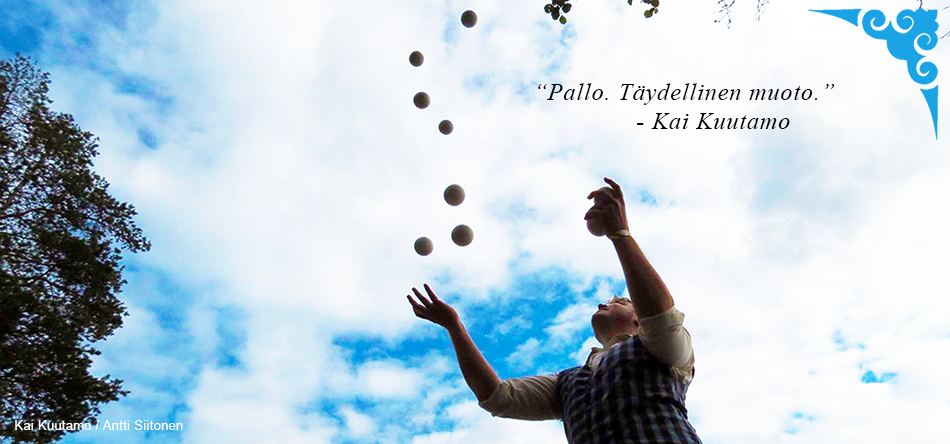
<style>
.page{position:relative;width:950px;height:444px}
.page>*{position:absolute;margin:0}
.t1{font:24px "TimesNewRomanPS-ItalicMT";letter-spacing:0.04em;color:#000000}
.t2{font:12.5px "ArialMT";letter-spacing:0.04em;color:#ffffff}
</style>
<div class="page">
<p class="t1" style="left:538px;top:83px;width:297px;height:46px">“Pallo. Täydellinen muoto.”<br>     - Kai Kuutamo</p>
<p class="t2" style="left:15px;top:420px;width:168px;height:10px">Kai Kuutamo / Antti Siitonen</p>
</div>
